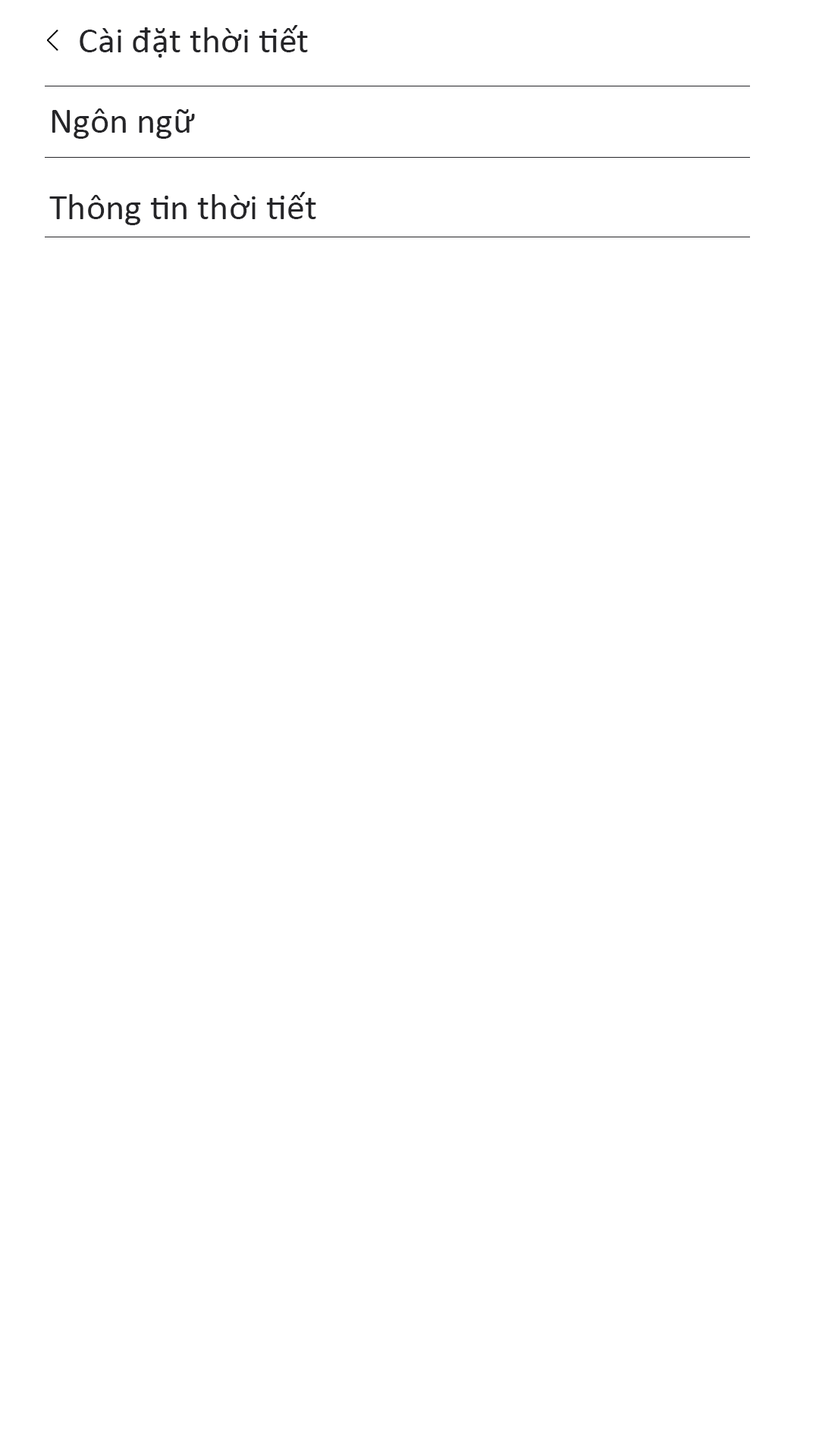
<style>
.page{position:relative;width:819px;height:1456px;background:#ffffff}
.page>*{position:absolute;margin:0}
.t1{font:36.4px "Calibri";color:#252528}
</style>
<div class="page">
<p class="t1" style="left:80px;top:25px;width:228px;height:33px">Cài đặt thời tiết</p>
<p class="t1" style="left:52px;top:108px;width:143px;height:31px">Ngôn ngữ</p>
<p class="t1" style="left:49px;top:192px;width:267px;height:33px">Thông tin thời tiết</p>
</div>
